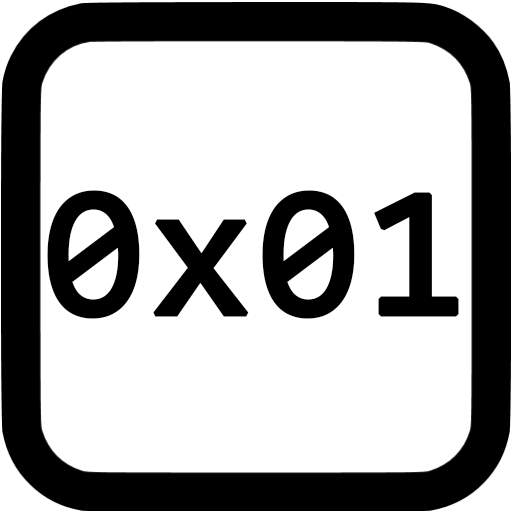
<style>
.page{position:relative;width:512px;height:512px;background:#ffffff}
.page>*{position:absolute;margin:0}
.t1{font:186.7px "Consolas";color:#000000;font-weight:bold}
</style>
<div class="page">
<p class="t1" style="left:47px;top:190px;width:412px;height:129px">0x01</p>
</div>
